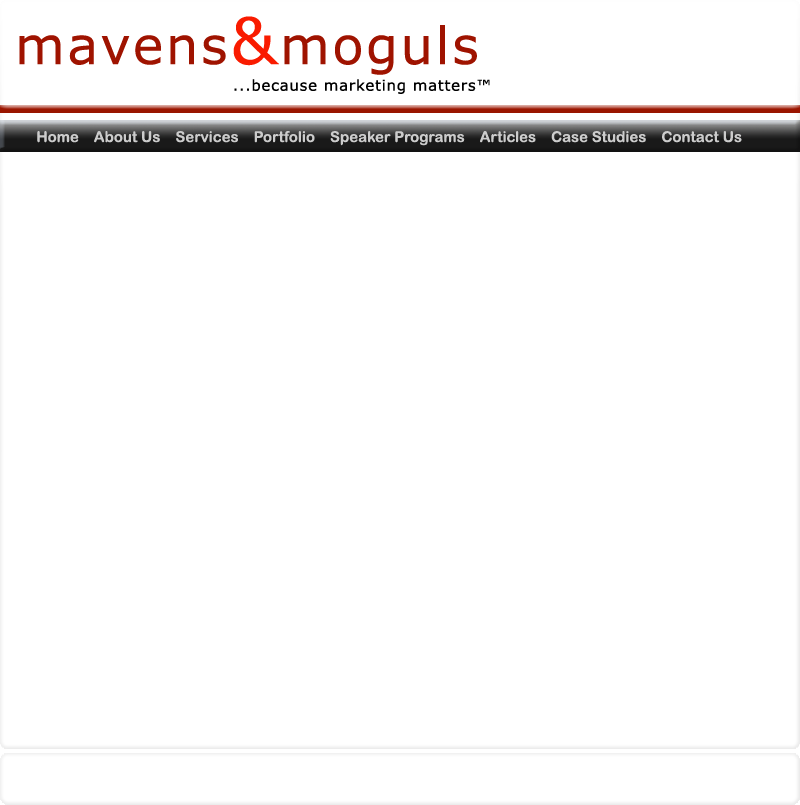
<style>
.page{position:relative;width:800px;height:805px;background:#ffffff}
.page>*{position:absolute;margin:0}
.t1{font:51.2px "Verdana";letter-spacing:0.05em;color:#9f1300}
.t2{font:64.1px "Verdana";letter-spacing:0.05em;color:#f91b00}
.t3{font:14.9px "Verdana";letter-spacing:0.05em;color:#000000}
.t4{font:14.9px "ArialRoundedMTBold";color:#cccccc}
</style>
<div class="page">
<p class="t1" style="left:19px;top:16px;width:458px;height:59px">mavens<span class="t2">&amp;</span>moguls</p>
<p class="t3" style="left:234px;top:79px;width:256px;height:15px">...because marketing matters™</p>
<p class="t4" style="left:37px;top:131px;width:705px;height:15px">Home    About Us    Services    Portfolio    Speaker Programs    Articles    Case Studies    Contact Us</p>
</div>
